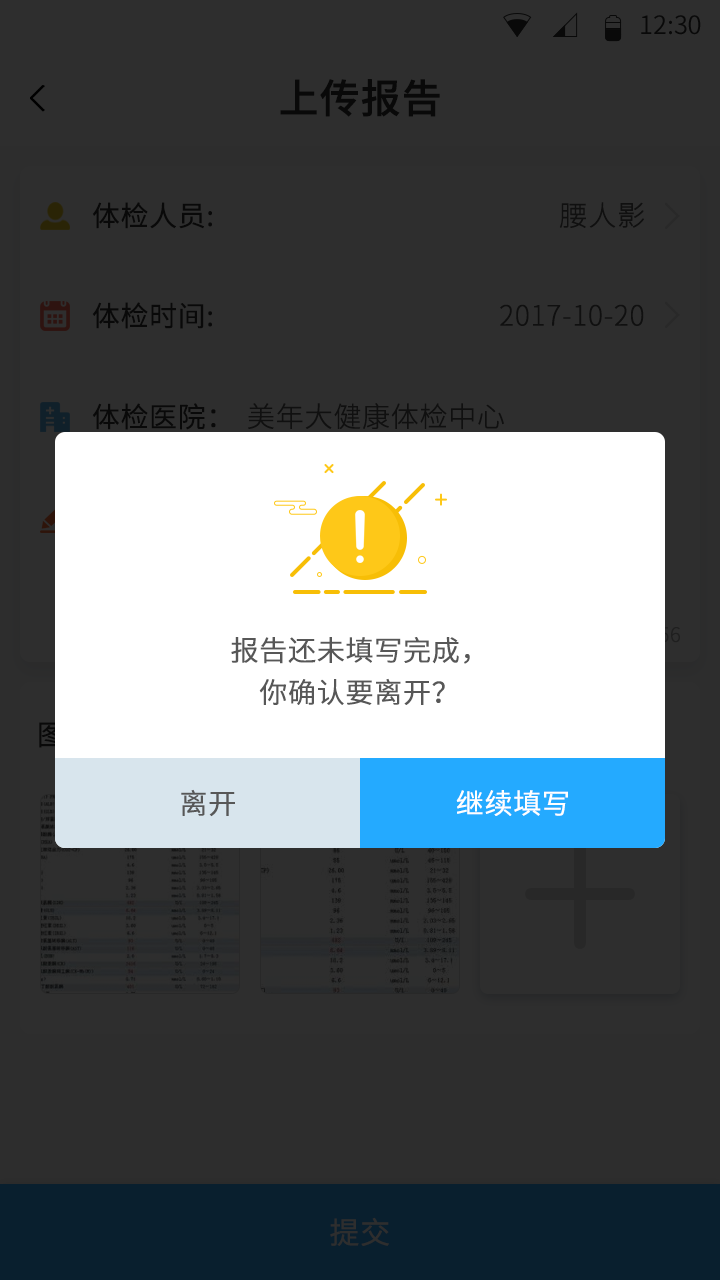
<style>
.page{position:relative;width:720px;height:1280px;background:#2e2e2e}
.page>*{position:absolute;margin:0}
.t1{font:25.4px "SourceHanSansCN-Normal";color:#090909}
.t2{font:40px "SourceHanSansCN-Medium";color:#090909;font-weight:bold}
.t3{font:28px "SourceHanSansCN-Normal";color:#090909;font-weight:bold}
.t4{font:28px "SourceHanSansCN-Light";color:#101010;font-weight:bold}
.t5{font:28px/42px "SourceHanSansCN-Normal";color:#575757;font-weight:bold}
.t6{font:28px "SourceHanSansCN-Normal";color:#575757;font-weight:bold}
.t7{font:28px "SourceHanSansCN-Normal";color:#ffffff;font-weight:bold}
.t8{font:30px "SourceHanSansCN-Normal";color:#2e2e2e;font-weight:bold}
</style>
<div class="page">
<p class="t1" style="left:641px;top:15px;width:60px;height:20px">12:30</p>
<p class="t2" style="left:280px;top:79px;width:160px;height:38px">上传报告</p>
<p class="t3" style="left:92px;top:202px;width:120px;height:27px">体检人员:</p>
<p class="t4" style="left:559px;top:202px;width:85px;height:26px">腰人影</p>
<p class="t3" style="left:92px;top:302px;width:120px;height:27px">体检时间:</p>
<p class="t4" style="left:500px;top:304px;width:144px;height:22px">2017-10-20</p>
<p class="t3" style="left:92px;top:403px;width:124px;height:27px">体检医院：</p>
<p class="t4" style="left:248px;top:403px;width:256px;height:27px">美年大健康体检中心</p>
<p class="t5" style="left:231px;top:637px;width:239px;height:68px;text-align:center">报告还未填写完成，<br>你确认要离开？</p>
<p class="t6" style="left:181px;top:789px;width:54px;height:28px">离开</p>
<p class="t7" style="left:456px;top:790px;width:112px;height:26px">继续填写</p>
<p class="t8" style="left:330px;top:1217px;width:59px;height:29px">提交</p>
</div>
